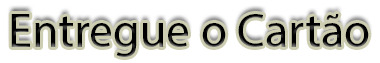
<style>
.page{position:relative;width:380px;height:63px;background:#ffffff}
.page>*{position:absolute;margin:0}
.t1{font:48px "MyriadPro-Regular";color:#000000}
</style>
<div class="page">
<p class="t1" style="left:11px;top:14px;width:358px;height:43px">Entregue o Cartão</p>
</div>
